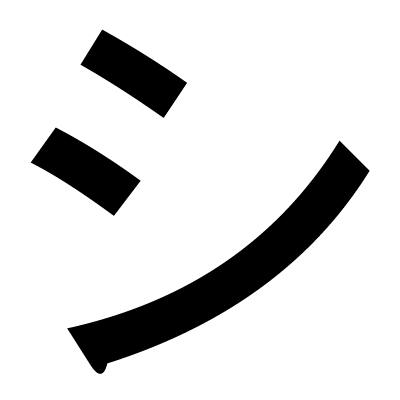
<style>
.page{position:relative;width:400px;height:400px;background:#ffffff}
.page>*{position:absolute;margin:0}
.t1{font:424.8px "MS-PGothic";color:#000000}
</style>
<div class="page">
<p class="t1" style="left:30px;top:29px;width:340px;height:345px">シ</p>
</div>
